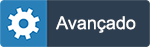
<style>
.page{position:relative;width:150px;height:47px;background:#2c3e50}
.page>*{position:absolute;margin:0}
.t1{font:17.9px "ArialMT";color:#ffffff}
</style>
<div class="page">
<p class="t1" style="left:56px;top:16px;width:80px;height:17px">Avançado</p>
</div>
